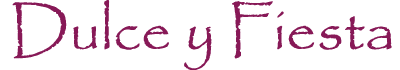
<style>
.page{position:relative;width:400px;height:70px;background:#ffffff}
.page>*{position:absolute;margin:0}
.t1{font:60px "Papyrus-Regular";color:#871957}
</style>
<div class="page">
<p class="t1" style="left:12px;top:0px;width:380px;height:71px">Dulce y Fiesta</p>
</div>
